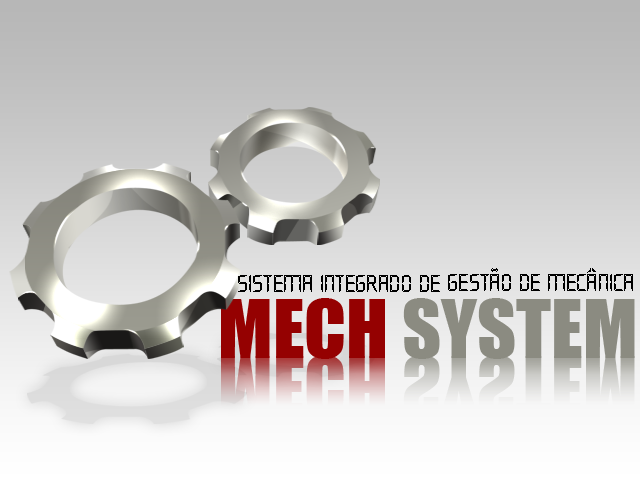
<style>
.page{position:relative;width:640px;height:480px}
.page>*{position:absolute;margin:0}
.t1{font:24.5px "Digiface";color:#000000;scale:0.94 1}
.t2{font:74.8px "Impact";color:#8b8b81}
.t3{font:74.8px "Impact";color:#950101}
.t4{font:74.8px "Impact"}
</style>
<div class="page">
<p class="t1" style="left:238px;top:268px;width:395px;height:24px">Sistema Integrado de gestão de mecânica</p>
<p class="t2" style="left:221px;top:298px;width:414px;height:61px"><span class="t3">MECH </span>SYSTEM</p>
<p class="t4" style="left:403px;top:355px;width:232px;height:61px">SYSTEM</p>
</div>
